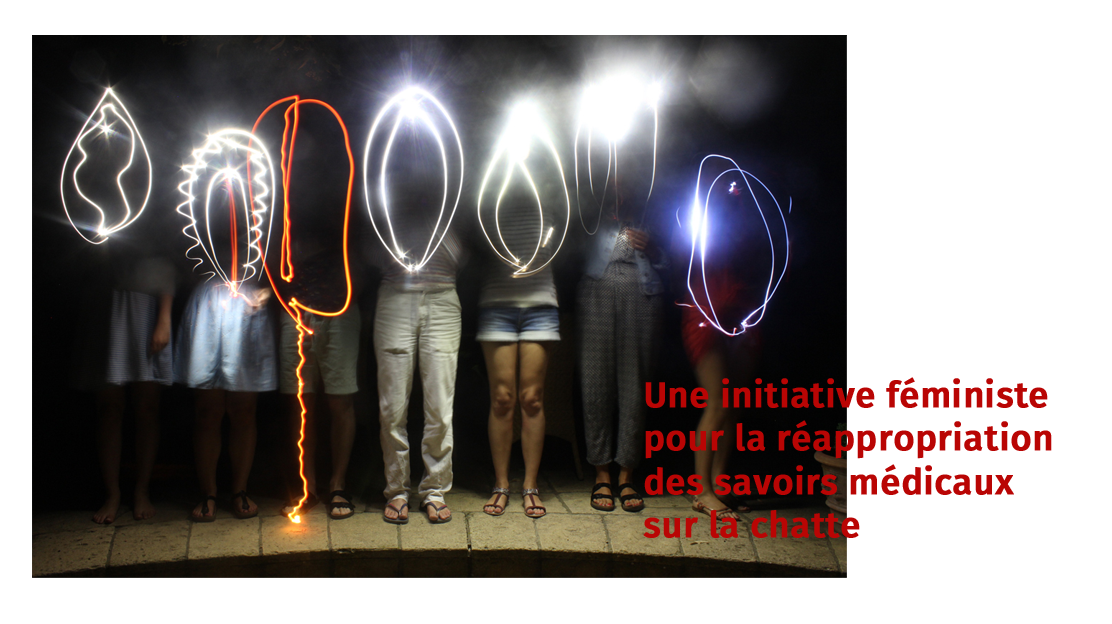
<style>
.page{position:relative;width:1112px;height:624px;background:#ffffff}
.page>*{position:absolute;margin:0}
.t1{font:36px "FiraSans-Medium";color:#b90504;font-weight:bold}
</style>
<div class="page">
<p class="t1" style="left:643px;top:377px;width:409px;height:161px">Une initiative féministe <br>pour la réappropriation <br>des savoirs médicaux<br>sur la chatte</p>
</div>
